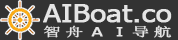
<style>
.page{position:relative;width:178px;height:40px;background:#333333}
.page>*{position:absolute;margin:0}
.t1{font:24px "Tahoma";color:#e5e5e5;font-weight:bold;scale:1.19 1}
.t2{font:12.6px "Tahoma";letter-spacing:0.2em;color:#e5e5e5;font-weight:bold;scale:1.43 1}
.t3{font:12.6px "SimSun";letter-spacing:0.2em;color:#e5e5e5;font-weight:bold;scale:1.43 1}
</style>
<div class="page">
<p class="t1" style="left:43px;top:4px;width:129px;height:19px">AIBoat.co</p>
<p class="t2" style="left:43px;top:25px;width:129px;height:13px"><span class="t3">智舟</span>A I<span class="t3">导航</span></p>
</div>
